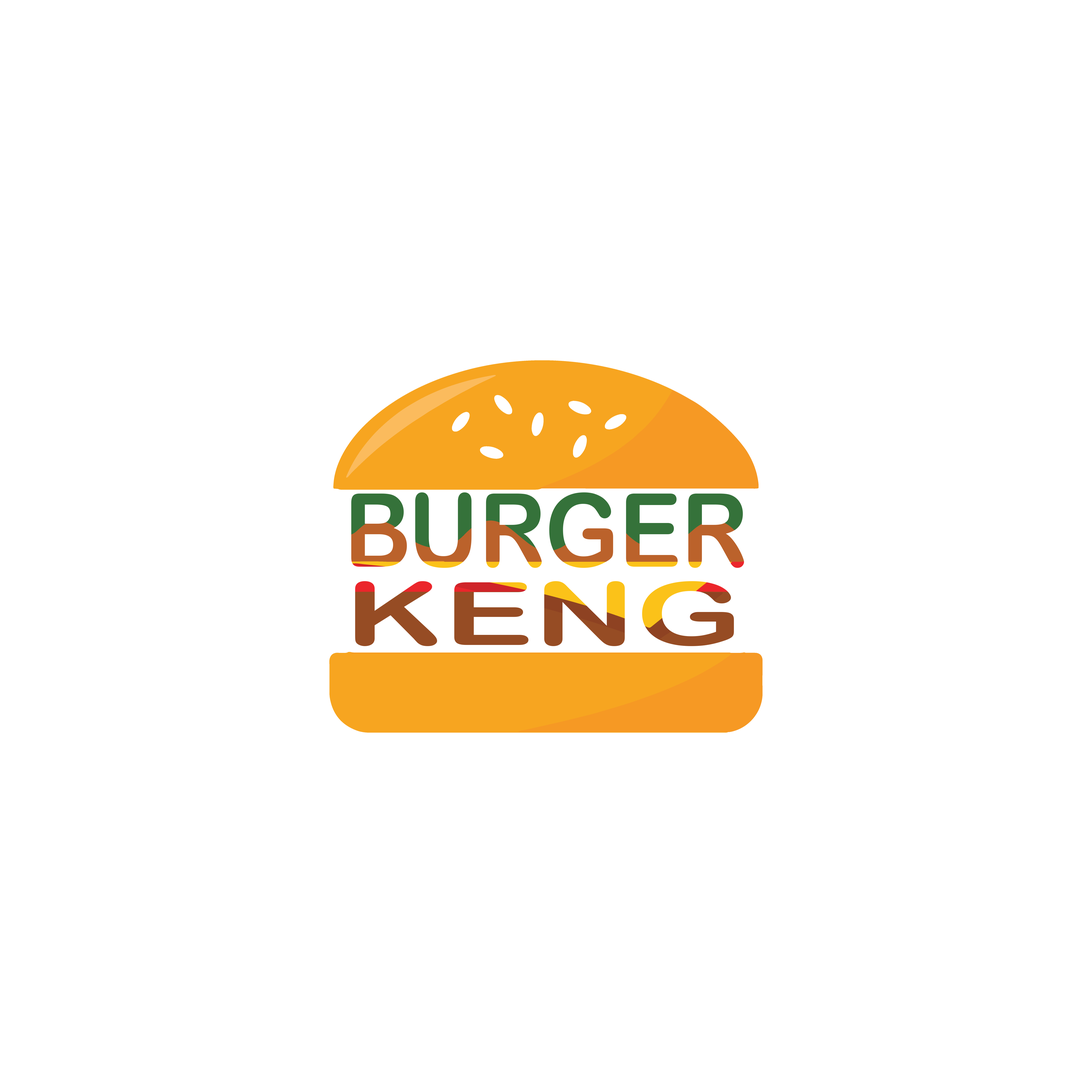
<style>
.page{position:relative;width:1092px;height:1092px;background:#ffffff}
.page>*{position:absolute;margin:0}
.t1{font:102.2px "ArialRoundedMTBold";scale:0.91 1}
.t2{font:87.6px "ArialRoundedMTBold";color:#964c24;scale:1.53 1}
</style>
<div class="page">
<p class="t1" style="left:351px;top:492px;width:393px;height:76px">BURGER</p>
<p class="t2" style="left:355px;top:581px;width:379px;height:65px">KENG</p>
</div>
